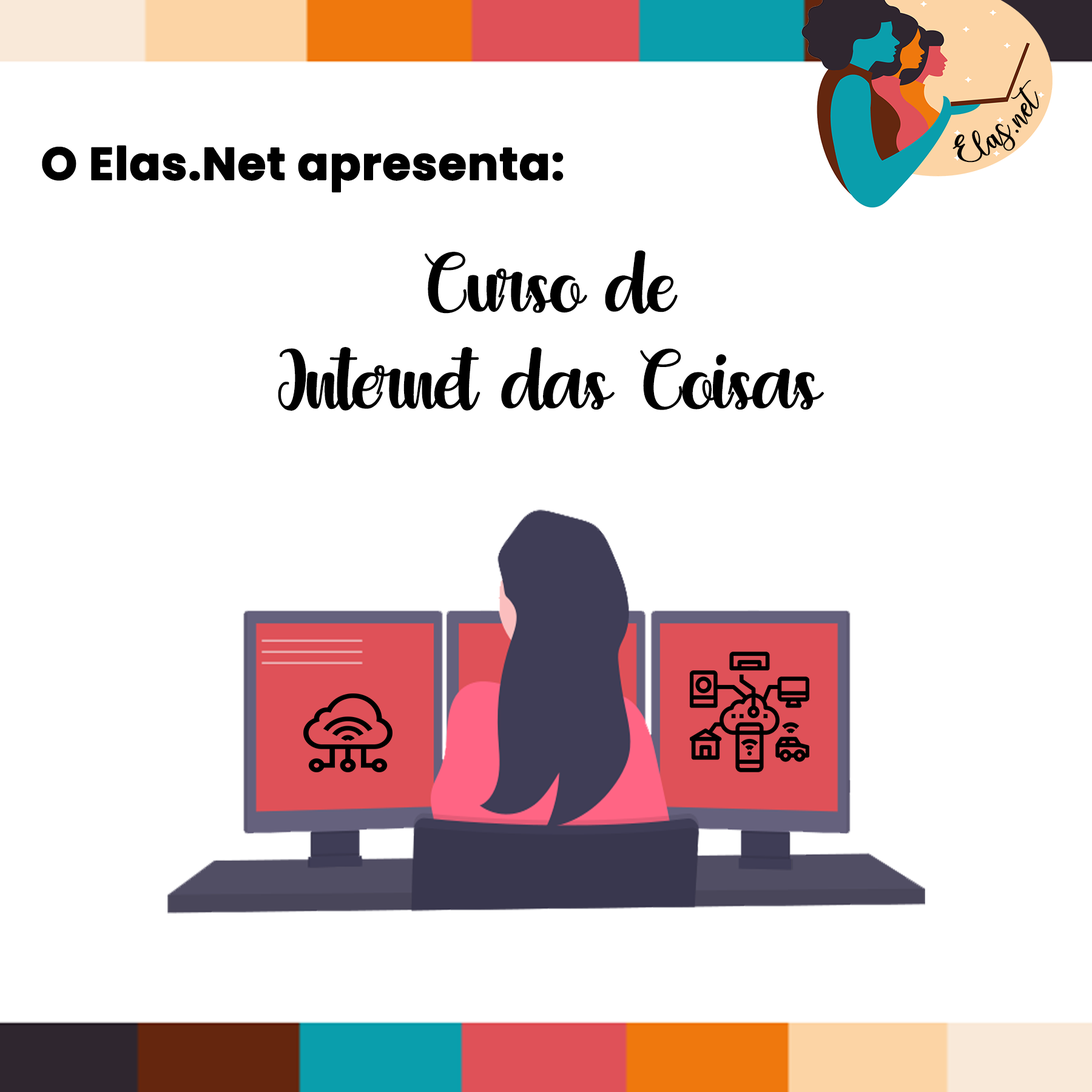
<style>
.page{position:relative;width:1092px;height:1092px;background:#ffffff}
.page>*{position:absolute;margin:0}
.t1{font:24.1px "charlinda-Regular";color:#000000;scale:1.18 1}
.t2{font:45.5px "Poppins-Bold";color:#000000;font-weight:bold}
.t3{font:138.2px/96.8px "puttroe";letter-spacing:-0.025em;color:#000000}
</style>
<div class="page">
<p class="t1" style="left:952px;top:80px;width:87px;height:83px;rotate:-41deg">Elas.net</p>
<p class="t2" style="left:42px;top:145px;width:522px;height:48px">O Elas.Net apresenta:</p>
<p class="t3" style="left:278px;top:250px;width:546px;height:161px;text-align:center">Curso de <br>Internet das Coisas</p>
</div>
